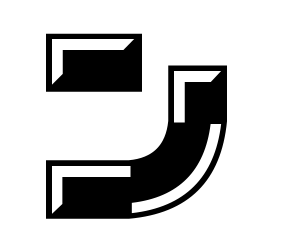
<style>
.page{position:relative;width:300px;height:250px;background:#ffffff}
.page>*{position:absolute;margin:0}
.t1{font:241.8px "TA-rb0925";letter-spacing:0.08em;color:#000000}
</style>
<div class="page">
<p class="t1" style="left:46px;top:33px;width:181px;height:186px">ン</p>
</div>
